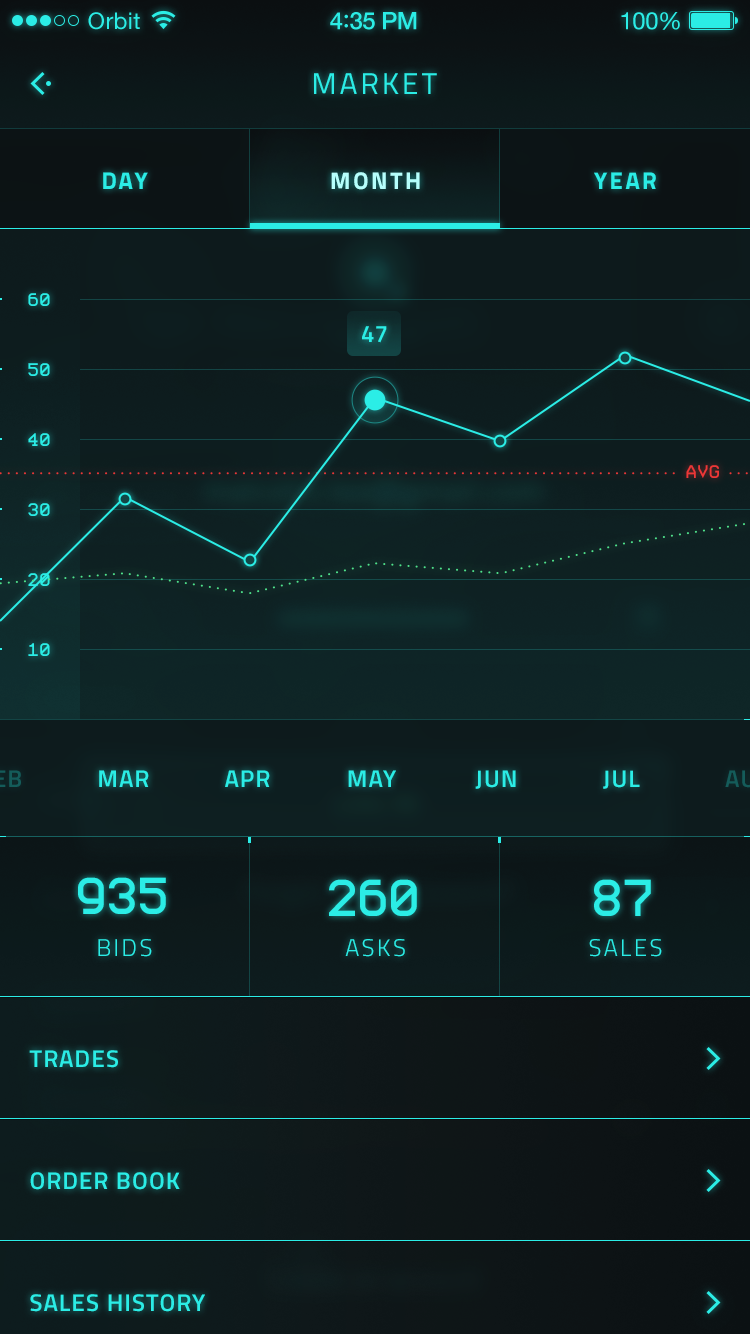
<style>
.page{position:relative;width:750px;height:1334px}
.page>*{position:absolute;margin:0}
.t1{font:23px "HelveticaNeue";letter-spacing:0.02em;color:#2bede6}
.t2{font:24px "HelveticaNeue-Medium";letter-spacing:-0.02em;color:#2bede6}
.t3{font:26px "Avenir-Medium";letter-spacing:-0.02em;color:#2bede6}
.t4{font:24px "HelveticaNeue";letter-spacing:-0.02em;color:#2bede6}
.t5{font:30px "Titillium-Regular";letter-spacing:0.1em;color:#2bede6;text-transform:uppercase}
.t6{font:24px "Titillium-Bold";letter-spacing:0.1em;color:#2bede6;text-transform:uppercase}
.t7{font:24px "Titillium-Bold";letter-spacing:0.1em;color:#b5fffc;text-transform:uppercase}
.t8{font:22px "ProFontWindows";letter-spacing:0.03em;color:#2bede6}
.t9{font:24px "Titillium-Semibold";color:#2bede6;text-transform:uppercase}
.t10{font:22px "ProFontWindows";letter-spacing:0.03em;color:#ed3737}
.t11{font:24px "Titillium-Semibold";letter-spacing:0.05em;color:#2bede6;text-transform:uppercase}
.t12{font:62px "ProFontWindows";color:#2bede6;text-transform:uppercase}
.t13{font:24px "Titillium-Light";letter-spacing:0.1em;color:#2bede6;text-transform:uppercase}
</style>
<div class="page">
<p class="t1" style="left:88px;top:12px;width:52px;height:18px">Orbit</p>
<p class="t2" style="left:330px;top:12px;width:87px;height:18px">4<span class="t3">:</span>35 PM</p>
<p class="t4" style="left:621px;top:12px;width:59px;height:18px">100%</p>
<p class="t5" style="left:314px;top:73px;width:123px;height:21px">MARKET</p>
<p class="t6" style="left:103px;top:172px;width:45px;height:17px">DAY</p>
<p class="t7" style="left:331px;top:172px;width:89px;height:18px">MONTH</p>
<p class="t6" style="left:594px;top:172px;width:62px;height:17px">YEAR</p>
<p class="t8" style="left:28px;top:293px;width:22px;height:13px">60</p>
<p class="t9" style="left:362px;top:326px;width:25px;height:17px">47</p>
<p class="t8" style="left:28px;top:363px;width:22px;height:13px">50</p>
<p class="t8" style="left:28px;top:433px;width:22px;height:13px">40</p>
<p class="t10" style="left:686px;top:465px;width:33px;height:13px">AVG</p>
<p class="t8" style="left:28px;top:503px;width:22px;height:13px">30</p>
<p class="t8" style="left:28px;top:573px;width:22px;height:13px">20</p>
<p class="t8" style="left:28px;top:643px;width:22px;height:13px">10</p>
<p class="t11" style="left:99px;top:770px;width:50px;height:17px">MAR</p>
<p class="t11" style="left:225px;top:770px;width:45px;height:17px">APR</p>
<p class="t11" style="left:348px;top:770px;width:48px;height:17px">MAY</p>
<p class="t11" style="left:475px;top:770px;width:41px;height:19px">JUN</p>
<p class="t11" style="left:603px;top:770px;width:37px;height:19px">JUL</p>
<p class="t12" style="left:78px;top:877px;width:88px;height:37px">935</p>
<p class="t12" style="left:329px;top:879px;width:88px;height:37px">260</p>
<p class="t12" style="left:594px;top:879px;width:57px;height:37px">87</p>
<p class="t13" style="left:98px;top:939px;width:54px;height:18px">BIDS</p>
<p class="t13" style="left:345px;top:939px;width:60px;height:18px">ASKS</p>
<p class="t13" style="left:589px;top:939px;width:73px;height:18px">SALES</p>
<p class="t11" style="left:29px;top:1050px;width:89px;height:18px">Trades</p>
<p class="t11" style="left:30px;top:1172px;width:150px;height:18px">Order Book</p>
<p class="t11" style="left:30px;top:1294px;width:175px;height:18px">Sales History</p>
</div>
